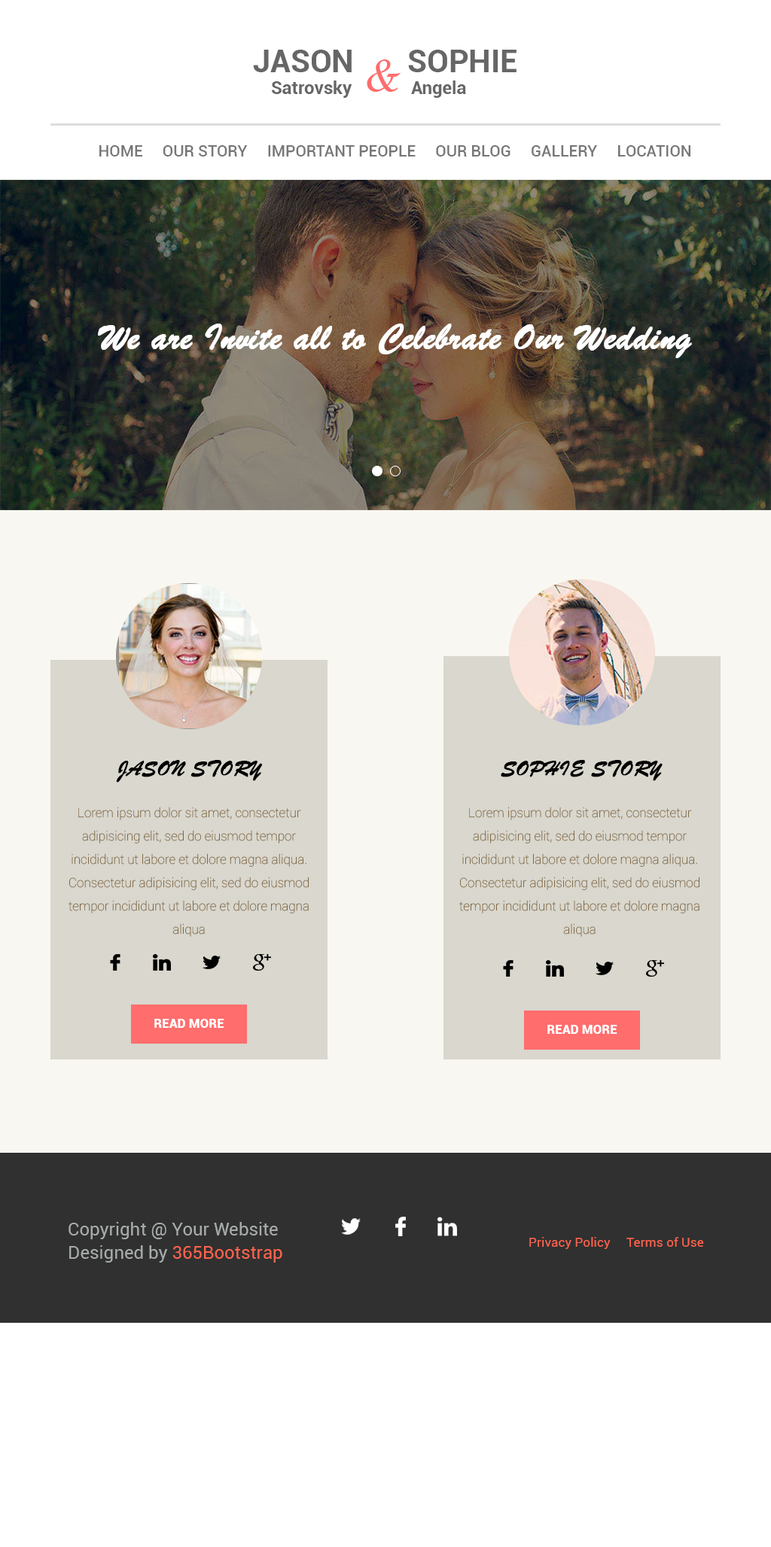
<style>
.page{position:relative;width:771px;height:1547px;background:#ffffff}
.page>*{position:absolute;margin:0}
.t1{font:18.1px "Roboto-Bold";color:#666666}
.t2{font:31.6px "Roboto-Bold";color:#666666;text-transform:uppercase}
.t3{font:42.9px "LucidaCalligraphy-Italic";color:#fe6d6d}
.t4{font:15.8px "Roboto-Medium";color:#777777;text-transform:uppercase}
.t5{font:38.4px "BrushScriptMT";color:#ffffff;font-weight:bold}
.t6{font:38.4px "BrushScriptMT";color:#ffffff;text-transform:uppercase;font-weight:bold}
.t7{font:22.6px "BrushScriptMT";color:#000000;text-transform:uppercase;font-weight:bold}
.t8{font:12.8px/23.3px "Roboto-Thin";color:#816943}
.t9{font:12.8px "Roboto-Black";color:#ffffff;text-transform:uppercase}
.t10{font:18.1px/23.3px "Roboto-Regular";color:#a6aaaa}
.t11{font:18.1px/23.3px "Roboto-Regular";color:#a6aaaa;text-transform:uppercase}
.t12{font:18.1px/23.3px "Roboto-Regular";color:#fe634d}
.t13{font:12.8px "Roboto-Regular";color:#fe634d}
</style>
<div class="page">
<p class="t1" style="left:253px;top:50px;width:263px;height:48px"><span class="t2">Jason </span><span class="t3">&amp; </span><span class="t2">Sophie<br>    </span>Satrovsky        Angela</p>
<p class="t4" style="left:99px;top:145px;width:591px;height:12px">Home     Our Story     Important People     Our Blog     Gallery     Location</p>
<p class="t5" style="left:98px;top:324px;width:594px;height:34px"><span class="t6">W</span>e are Invite all to Celebrate Our Wedding</p>
<p class="t7" style="left:116px;top:760px;width:147px;height:23px">Jason story</p>
<p class="t7" style="left:500px;top:760px;width:162px;height:21px">sophie story</p>
<p class="t8" style="left:68px;top:807px;width:241px;height:130px;text-align:center">Lorem ipsum dolor sit amet, consectetur adipisicing elit, sed do eiusmod tempor incididunt ut labore et dolore magna aliqua. Consectetur adipisicing elit, sed do eiusmod tempor incididunt ut labore et dolore magna aliqua</p>
<p class="t8" style="left:459px;top:807px;width:240px;height:130px;text-align:center">Lorem ipsum dolor sit amet, consectetur adipisicing elit, sed do eiusmod tempor incididunt ut labore et dolore magna aliqua. Consectetur adipisicing elit, sed do eiusmod tempor incididunt ut labore et dolore magna aliqua</p>
<p class="t9" style="left:154px;top:1019px;width:70px;height:9px">Read More</p>
<p class="t9" style="left:547px;top:1025px;width:70px;height:9px">Read More</p>
<p class="t10" style="left:68px;top:1222px;width:214px;height:41px"><span class="t11">C</span>opyright @ Your Website<br>Designed by <span class="t12">365Bootstrap</span></p>
<p class="t13" style="left:529px;top:1237px;width:175px;height:12px">Privacy Policy     Terms of Use</p>
</div>
